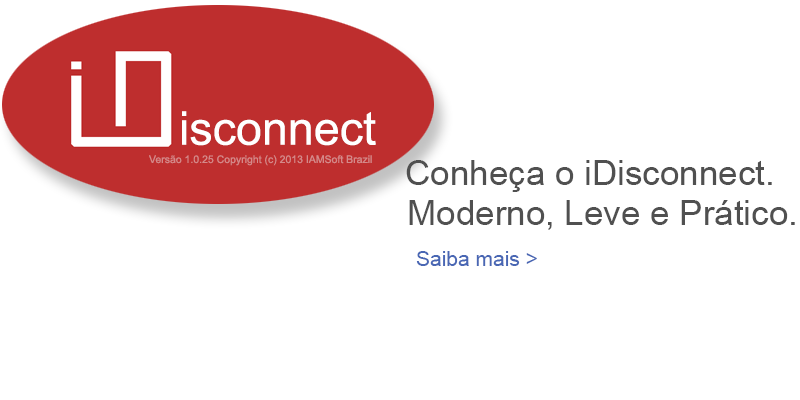
<style>
.page{position:relative;width:800px;height:400px;background:#ffffff}
.page>*{position:absolute;margin:0}
.t1{font:80px "ArialMT";color:#ffffff}
.t2{font:18px "ArialMT";color:#d58989}
.t3{font:60px "ArialMT";color:#505050}
.t4{font:36px "ArialMT";color:#4967b4}
</style>
<div class="page">
<p class="t1" style="left:182px;top:111px;width:194px;height:35px">isconnect</p>
<p class="t2" style="left:149px;top:155px;width:223px;height:11px">Versão 1.0.25 Copyright (c) 2013 IAMSoft Brazil</p>
<p class="t3" style="left:406px;top:160px;width:366px;height:32px">Conheça o iDisconnect.</p>
<p class="t3" style="left:409px;top:200px;width:386px;height:30px">Moderno, Leve e Prático.</p>
<p class="t4" style="left:416px;top:251px;width:121px;height:15px">Saiba mais &gt;</p>
</div>
